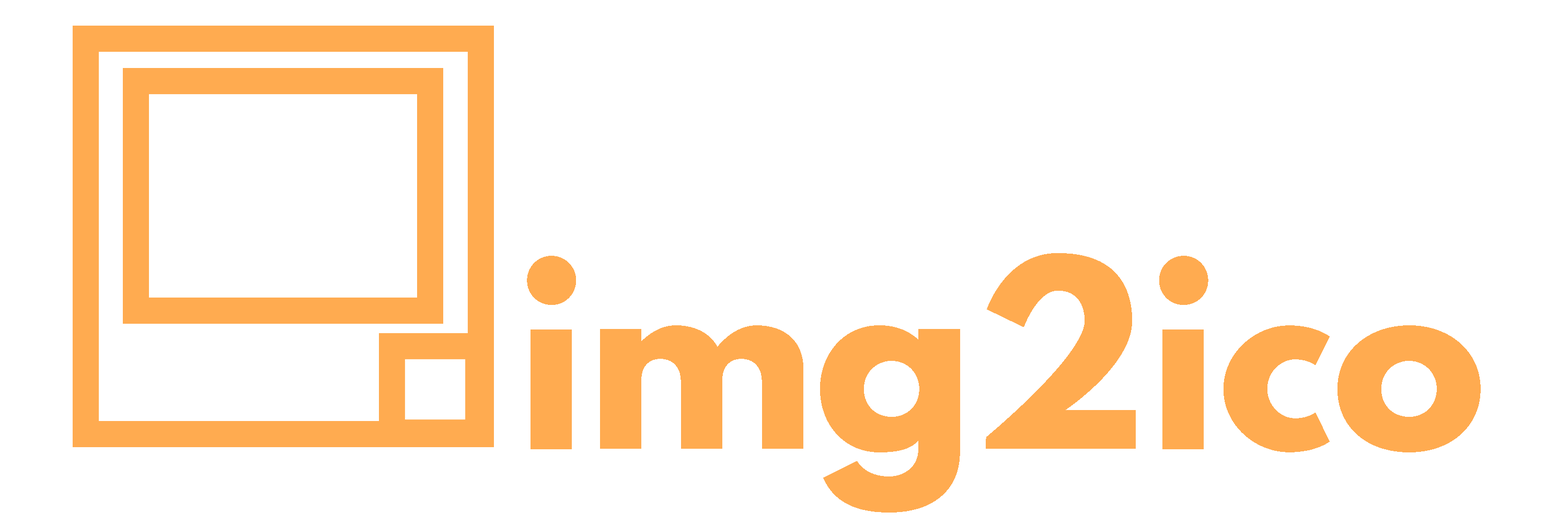
<style>
.page{position:relative;width:1568px;height:523px;background:#ffffff}
.page>*{position:absolute;margin:0}
.t1{font:232.1px "LeagueSpartan-Bold";color:#ffab50}
</style>
<div class="page">
<p class="t1" style="left:527px;top:253px;width:954px;height:259px">img2ico</p>
</div>
